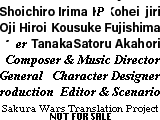
<style>
.page{position:relative;width:160px;height:120px;background:#ffffff}
.page>*{position:absolute;margin:0}
.t1{font:12.5px "AcuminPro-Bold";color:#000000}
.t2{font:12.5px "TimesNewRomanPS-BoldItalicMT";color:#000000}
.t3{font:8.3px "Tiny-Times-Regular";letter-spacing:-0.075em;color:#000000}
.t4{font:8.3px "Tiny-Times-Regular";letter-spacing:0.045em;color:#000000}
.t5{font:8.3px "Tiny-Times-Regular";letter-spacing:-0.01em;color:#000000}
.t6{font:12.5px "RPGSystem";color:#000000}
.t7{font:12.5px "RPGSystem";letter-spacing:0.1em;color:#000000;scale:1.17 1}
.t8{font:12.5px "RPGSystem";letter-spacing:0.16em;color:#000000}
</style>
<div class="page">
<p class="t1" style="left:0px;top:22px;width:46px;height:12px">Oji Hiroi</p>
<p class="t1" style="left:52px;top:22px;width:108px;height:12px">Kousuke Fujishima</p>
<p class="t1" style="left:74px;top:38px;width:86px;height:10px">Satoru Akahori</p>
<p class="t2" style="left:16px;top:42px;width:11px;height:6px">er</p>
<p class="t2" style="left:6px;top:55px;width:154px;height:12px">Composer &amp; Music Director</p>
<p class="t2" style="left:0px;top:71px;width:43px;height:9px">General</p>
<p class="t2" style="left:53px;top:71px;width:107px;height:12px">Character Designer</p>
<p class="t2" style="left:60px;top:87px;width:100px;height:9px">Editor &amp; Scenario</p>
<p class="t3" style="left:2px;top:105px;width:156px;height:9px">Sa<span class="t4">k</span>ura Wars Translation Proj<span class="t5">e</span>ct</p>
<p class="t6" style="left:50px;top:113px;width:61px;height:7px">NO<span class="t7">T</span>FO<span class="t8">R</span>SALE</p>
</div>
